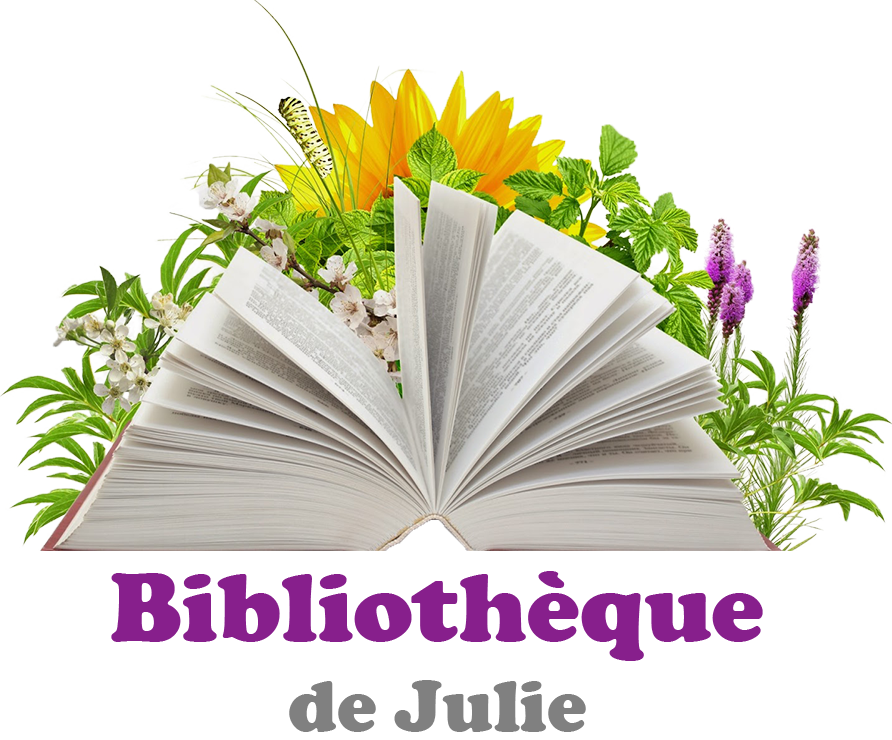
<style>
.page{position:relative;width:892px;height:740px;background:#ffffff}
.page>*{position:absolute;margin:0}
.t1{font:100px "CooperBlack";color:#871f8c}
.t2{font:75px "CooperBlack";color:#808080}
</style>
<div class="page">
<p class="t1" style="left:111px;top:571px;width:652px;height:161px;text-align:center">Bibliothèque<br><span class="t2">de Julie</span></p>
</div>
